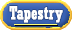
<style>
.page{position:relative;width:72px;height:30px}
.page>*{position:absolute;margin:0}
.t1{font:18px "Rockwell-Condensed";color:#ffffff;font-weight:bold}
</style>
<div class="page">
<p class="t1" style="left:9px;top:6px;width:54px;height:17px">Tapestry</p>
</div>
